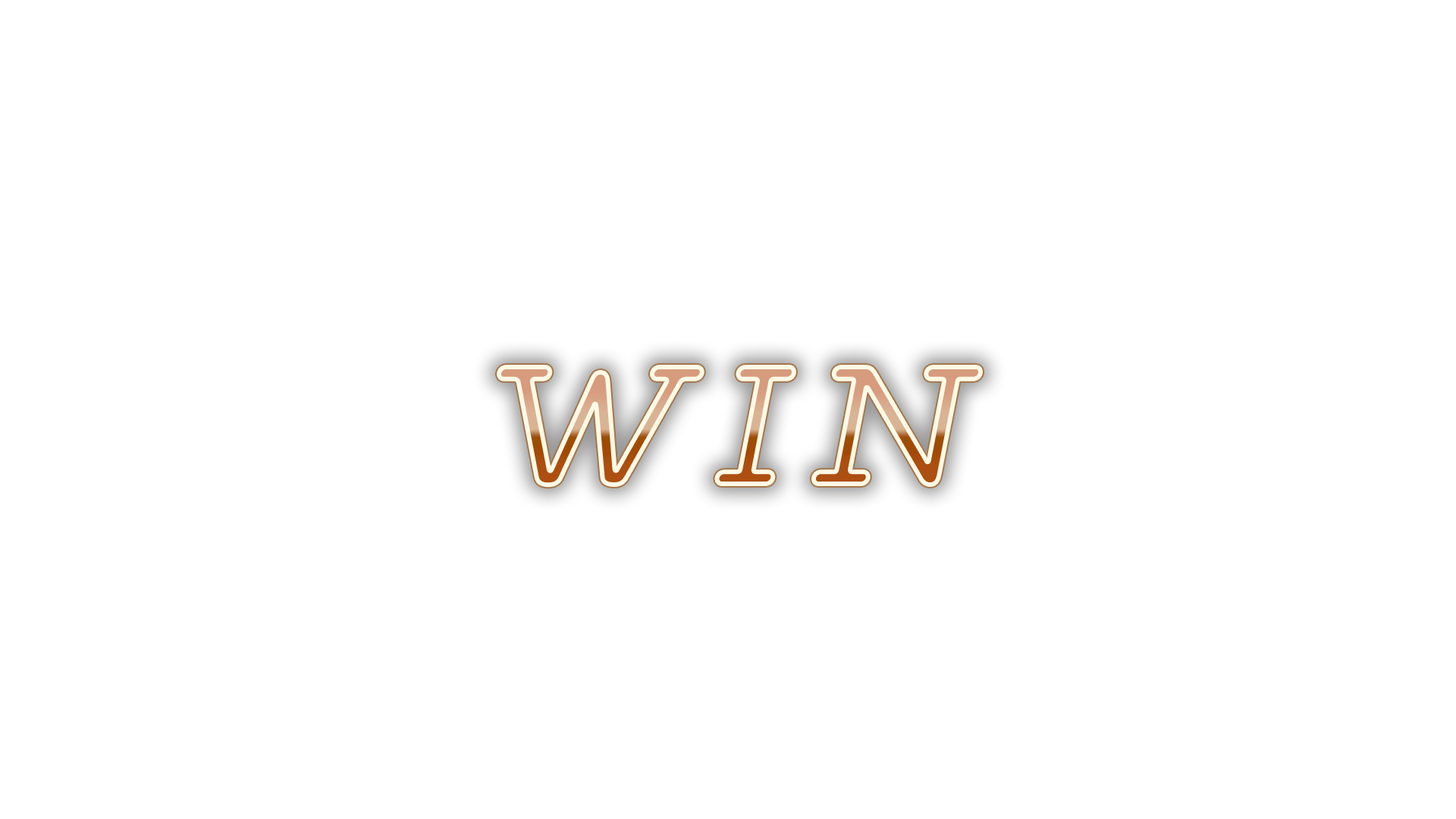
<style>
.page{position:relative;width:1456px;height:819px;background:#ffffff}
.page>*{position:absolute;margin:0}
.t1{font:189.6px "Maxular-LightItalic";letter-spacing:0.2em}
</style>
<div class="page">
<p class="t1" style="left:499px;top:367px;width:482px;height:118px">WIN</p>
</div>
